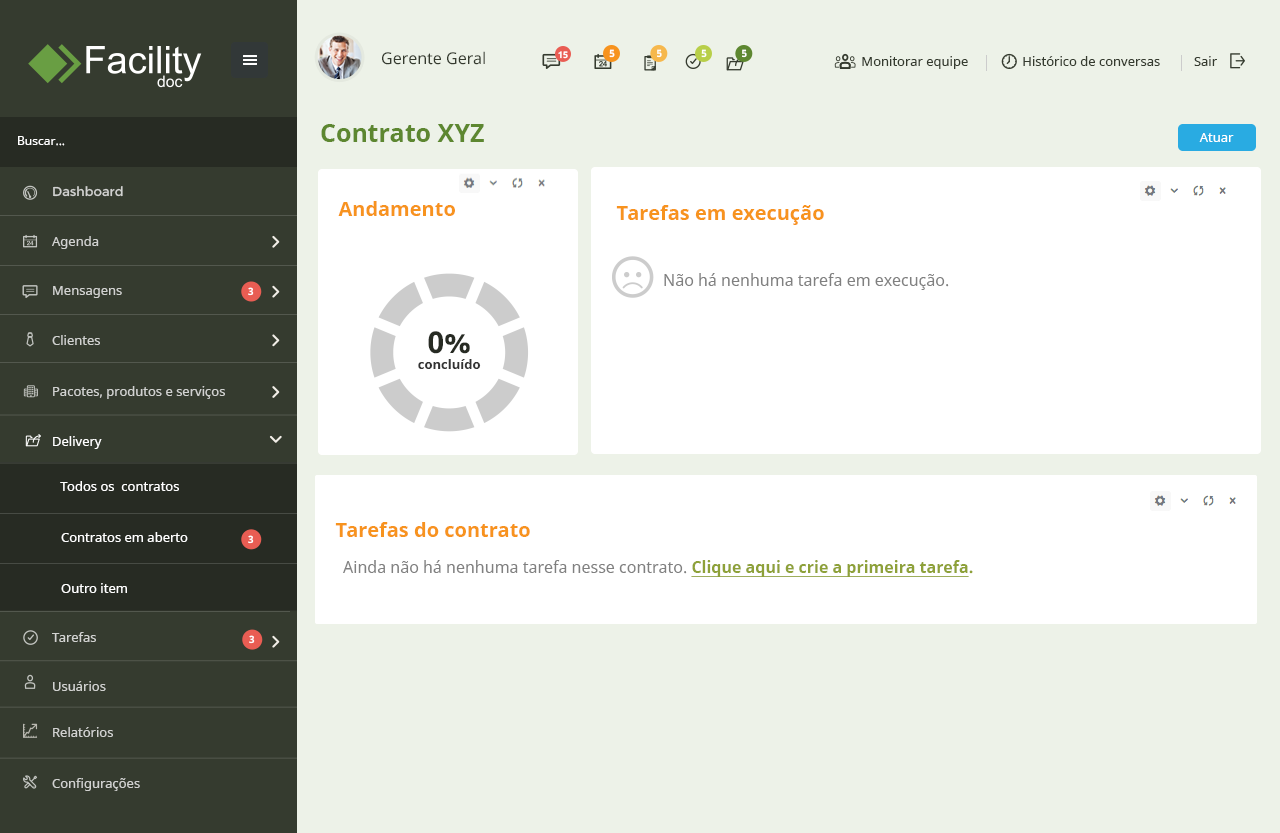
<style>
.page{position:relative;width:1280px;height:833px;background:#edf2e8}
.page>*{position:absolute;margin:0}
.t1{font:16px "NotoSans";color:#353b2f}
.t2{font:9px "NotoSans-Bold";color:#ffffff}
.t3{font:10px "NotoSans-Bold";color:#ffffff}
.t4{font:13px "NotoSans";color:#353b2f}
.t5{font:25px "NotoSans-Bold";color:#5d8730}
.t6{font:12px "NotoSans";color:#ffffff}
.t7{font:13px "NotoSans";color:#ffffff}
.t8{font:13px "Montserrat-Regular";color:#d1d2d0}
.t9{font:20px "NotoSans-Bold";color:#f7931e}
.t10{font:13px "NotoSans";color:#d1d2d0}
.t11{font:16px "NotoSans";color:#808080}
.t12{font:13px "NotoSans-Bold";color:#333333}
.t13{font:30px "NotoSans-Bold";color:#272b23}
.t14{font:16px "NotoSans-Bold";color:#8ea139;text-decoration:underline}
.t15{font:16px "NotoSans-Bold";color:#8ea139}
</style>
<div class="page">
<p class="t1" style="left:382px;top:51px;width:103px;height:14px">Gerente Geral</p>
<p class="t2" style="left:558px;top:51px;width:10px;height:8px">15</p>
<p class="t3" style="left:609px;top:49px;width:6px;height:9px">5</p>
<p class="t3" style="left:657px;top:49px;width:5px;height:9px">5</p>
<p class="t3" style="left:701px;top:49px;width:6px;height:9px">5</p>
<p class="t3" style="left:742px;top:49px;width:5px;height:9px">5</p>
<p class="t4" style="left:862px;top:56px;width:355px;height:13px">Monitorar equipe                Histórico de conversas          Sair</p>
<p class="t5" style="left:321px;top:124px;width:163px;height:18px">Contrato XYZ</p>
<p class="t6" style="left:18px;top:136px;width:47px;height:10px">Buscar...</p>
<p class="t7" style="left:1199px;top:133px;width:35px;height:9px">Atuar</p>
<p class="t8" style="left:53px;top:186px;width:70px;height:11px">Dashboard</p>
<p class="t9" style="left:338px;top:201px;width:117px;height:15px">Andamento</p>
<p class="t9" style="left:616px;top:205px;width:208px;height:20px">Tarefas em execução</p>
<p class="t10" style="left:52px;top:236px;width:47px;height:13px">Agenda</p>
<p class="t11" style="left:664px;top:273px;width:285px;height:17px">Não há nenhuma tarefa em execução.</p>
<p class="t10" style="left:53px;top:286px;width:69px;height:12px">Mensagens</p>
<p class="t3" style="left:248px;top:287px;width:6px;height:9px">3</p>
<p class="t10" style="left:52px;top:335px;width:48px;height:10px">Clientes</p>
<p class="t12" style="left:418px;top:331px;width:63px;height:38px;text-align:center"><span class="t13">0%<br></span>concluído</p>
<p class="t10" style="left:53px;top:386px;width:172px;height:13px">Pacotes, produtos e serviços</p>
<p class="t7" style="left:53px;top:436px;width:49px;height:13px">Delivery</p>
<p class="t7" style="left:60px;top:481px;width:119px;height:10px">Todos os  contratos</p>
<p class="t7" style="left:61px;top:532px;width:127px;height:10px">Contratos em aberto</p>
<p class="t9" style="left:335px;top:522px;width:195px;height:15px">Tarefas do contrato</p>
<p class="t3" style="left:248px;top:535px;width:6px;height:9px">3</p>
<p class="t11" style="left:343px;top:560px;width:630px;height:17px">Ainda não há nenhuma tarefa nesse contrato. <span class="t14">Clique aqui e crie a primeira tarefa</span><span class="t15">.</span></p>
<p class="t7" style="left:61px;top:583px;width:66px;height:10px">Outro item</p>
<p class="t10" style="left:52px;top:632px;width:44px;height:10px">Tarefas</p>
<p class="t3" style="left:249px;top:635px;width:6px;height:9px">3</p>
<p class="t10" style="left:53px;top:681px;width:53px;height:10px">Usuários</p>
<p class="t10" style="left:53px;top:727px;width:60px;height:10px">Relatórios</p>
<p class="t10" style="left:52px;top:778px;width:88px;height:13px">Configurações</p>
</div>
